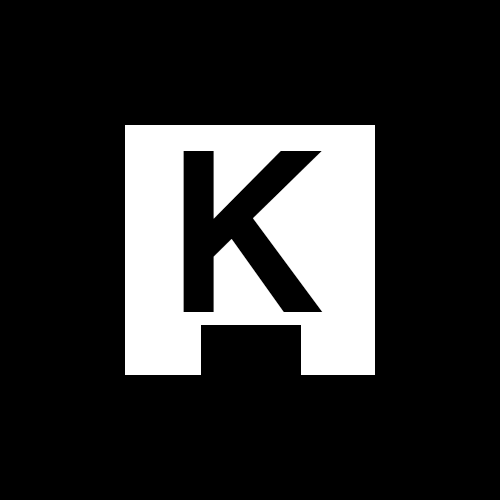
<style>
.page{position:relative;width:500px;height:500px;background:#000000}
.page>*{position:absolute;margin:0}
.t1{font:250px "Vrinda-Bold";letter-spacing:0.025em;color:#000000}
</style>
<div class="page">
<p class="t1" style="left:183px;top:151px;width:140px;height:161px">K</p>
</div>
